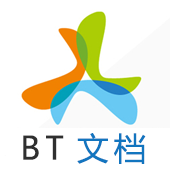
<style>
.page{position:relative;width:170px;height:170px;background:#ffffff}
.page>*{position:absolute;margin:0}
.t1{font:32px "MicrosoftYaHei";letter-spacing:0.16em;color:#2f2f2f}
.t2{font:32px "MicrosoftYaHei";letter-spacing:0.16em;color:#1275bf}
</style>
<div class="page">
<p class="t1" style="left:23px;top:133px;width:123px;height:31px">BT<span class="t2">文档</span></p>
</div>
